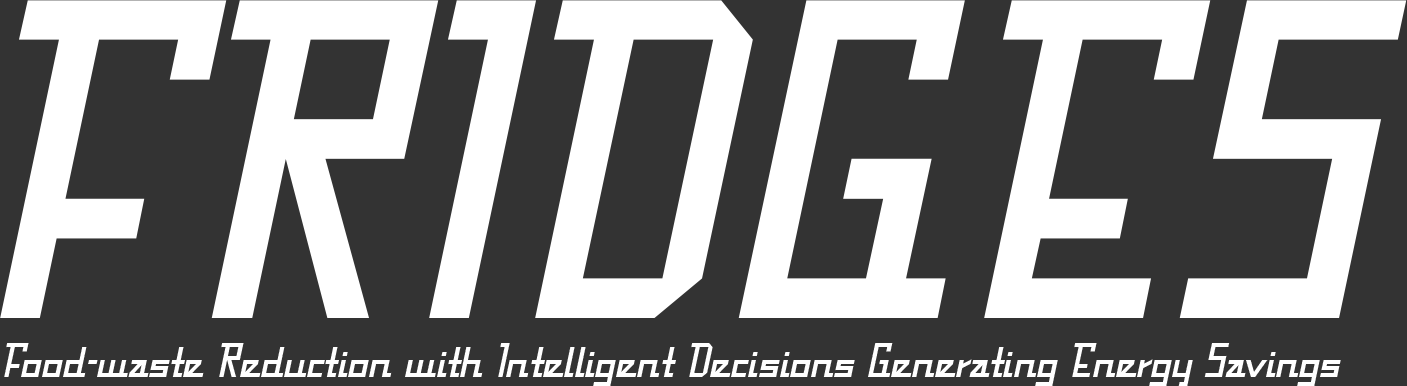
<style>
.page{position:relative;width:1407px;height:386px;background:#333333}
.page>*{position:absolute;margin:0}
.t1{font:400px "Fabian-Regular";letter-spacing:0.02em;color:#ffffff}
.t2{font:43px "Fabian-Regular";letter-spacing:-0.005em;color:#ffffff}
</style>
<div class="page">
<p class="t1" style="left:0px;top:0px;width:1407px;height:318px">FRIDGES</p>
<p class="t2" style="left:4px;top:343px;width:1337px;height:43px">Food-waste Reduction with Intelligent Decisions Generating Energy Savings</p>
</div>
